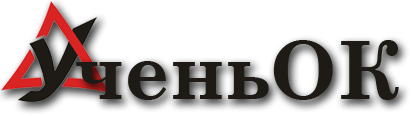
<style>
.page{position:relative;width:412px;height:116px;background:#ffffff}
.page>*{position:absolute;margin:0}
.t1{font:80px "CenturySchoolbook-Bold";color:#1e1b16}
</style>
<div class="page">
<p class="t1" style="left:76px;top:40px;width:323px;height:60px">ченьОК</p>
</div>
